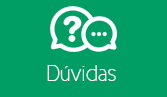
<style>
.page{position:relative;width:167px;height:97px;background:#009e64}
.page>*{position:absolute;margin:0}
.t1{font:22.7px "CicleFina";color:#ffffff}
</style>
<div class="page">
<p class="t1" style="left:47px;top:65px;width:69px;height:16px">Dúvidas</p>
</div>
